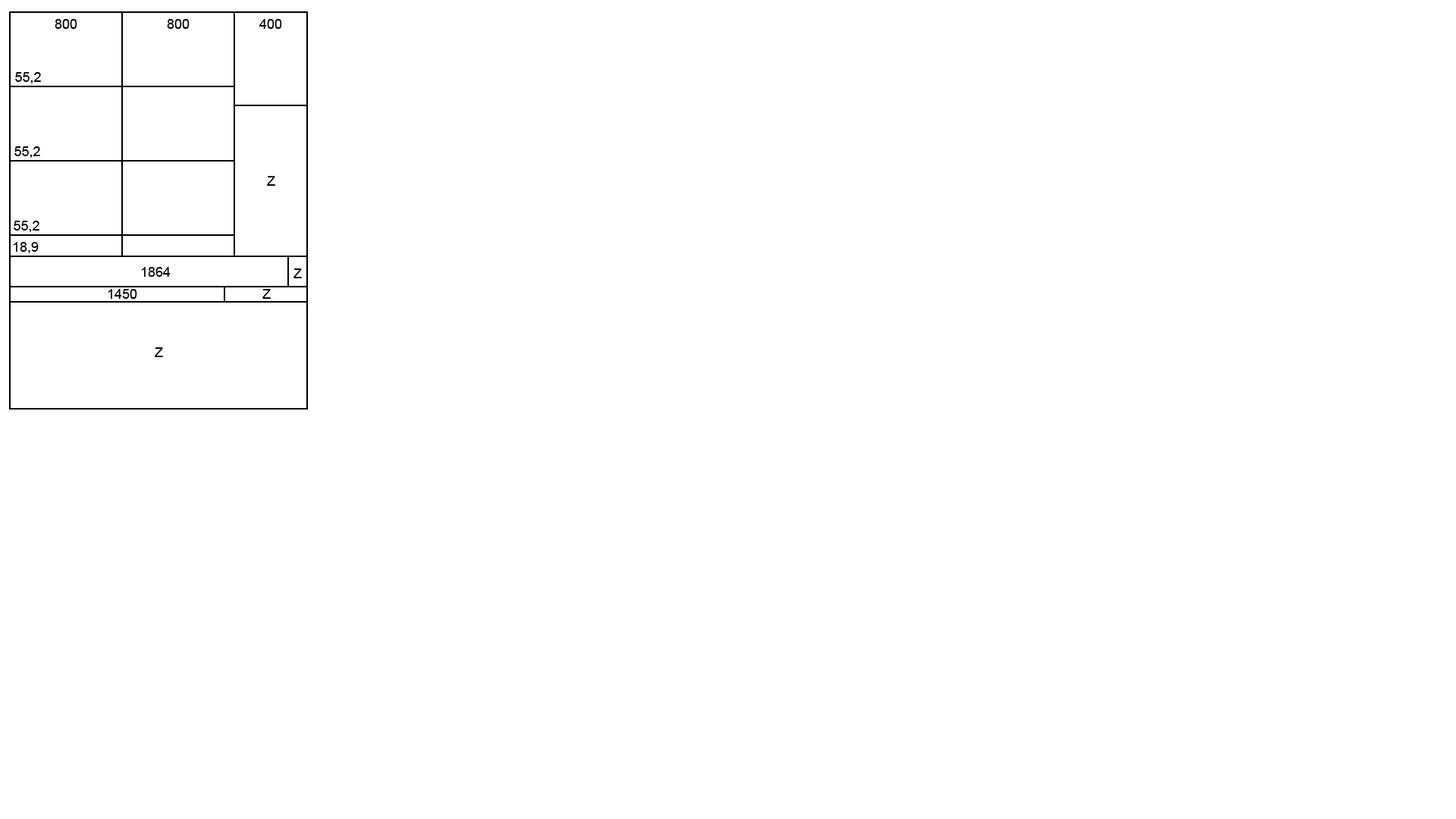
<style>
.page{position:relative;width:1456px;height:819px;background:#ffffff}
.page>*{position:absolute;margin:0}
.t1{font:13.6px "ArialMT";color:#000000}
</style>
<div class="page">
<p class="t1" style="left:55px;top:19px;width:22px;height:10px">800</p>
<p class="t1" style="left:167px;top:19px;width:23px;height:10px">800</p>
<p class="t1" style="left:259px;top:19px;width:23px;height:10px">400</p>
<p class="t1" style="left:15px;top:72px;width:26px;height:11px">55,2</p>
<p class="t1" style="left:14px;top:146px;width:26px;height:12px">55,2</p>
<p class="t1" style="left:267px;top:176px;width:8px;height:10px">Z</p>
<p class="t1" style="left:14px;top:221px;width:25px;height:11px">55,2</p>
<p class="t1" style="left:13px;top:242px;width:26px;height:11px">18,9</p>
<p class="t1" style="left:141px;top:267px;width:30px;height:10px">1864</p>
<p class="t1" style="left:293px;top:268px;width:9px;height:10px">Z</p>
<p class="t1" style="left:108px;top:289px;width:29px;height:10px">1450</p>
<p class="t1" style="left:262px;top:289px;width:9px;height:10px">Z</p>
<p class="t1" style="left:155px;top:347px;width:8px;height:10px">Z</p>
</div>
